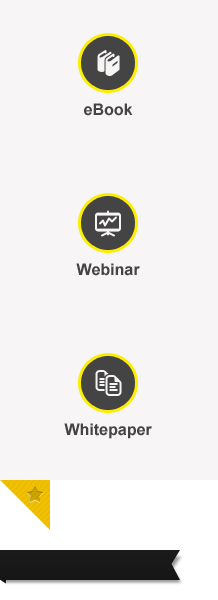
<style>
.page{position:relative;width:218px;height:600px;background:#f7f5f5}
.page>*{position:absolute;margin:0}
.t1{font:16px "Arial-BoldMT";color:#444444}
</style>
<div class="page">
<p class="t1" style="left:84px;top:103px;width:49px;height:13px">eBook</p>
<p class="t1" style="left:76px;top:263px;width:64px;height:13px">Webinar</p>
<p class="t1" style="left:64px;top:423px;width:88px;height:16px">Whitepaper</p>
</div>
